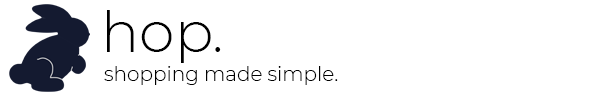
<style>
.page{position:relative;width:600px;height:96px;background:#ffffff}
.page>*{position:absolute;margin:0}
.t1{font:57px "Montserrat-Light";color:#000000}
.t2{font:20px "Montserrat-Light";color:#000000}
</style>
<div class="page">
<p class="t1" style="left:107px;top:10px;width:114px;height:53px">hop.</p>
<p class="t2" style="left:104px;top:66px;width:234px;height:19px">shopping made simple.</p>
</div>
